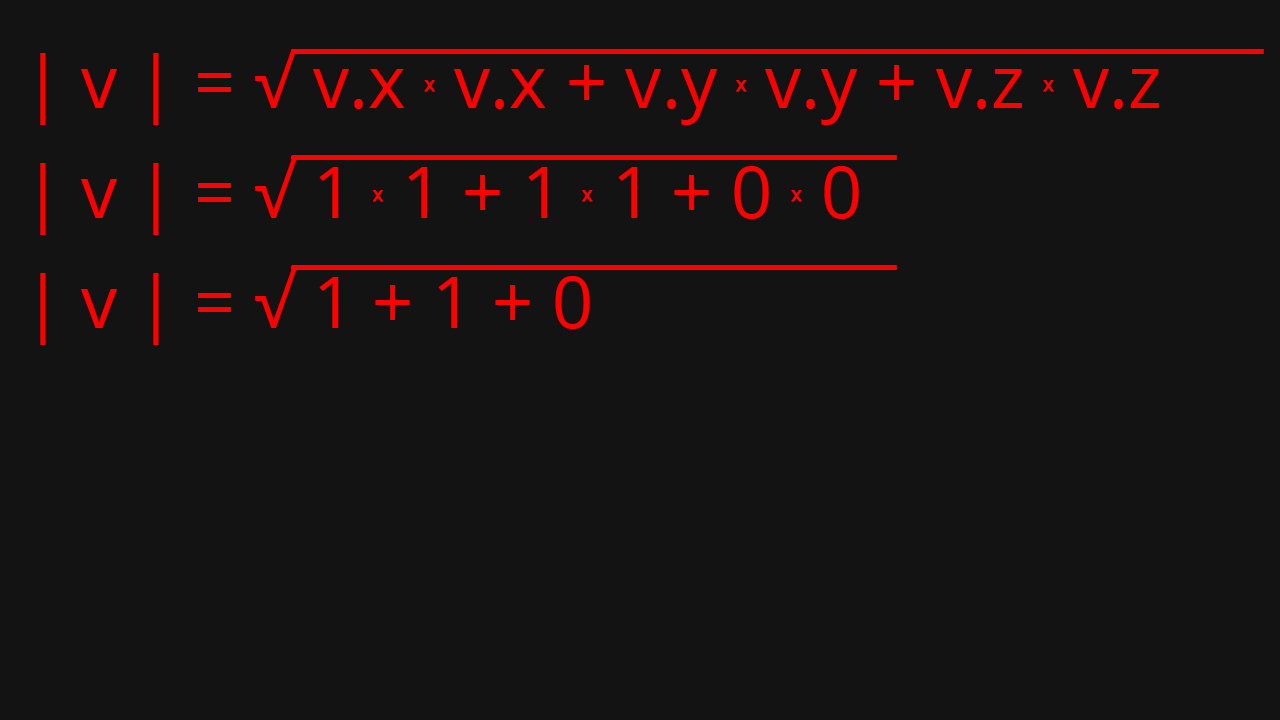
<style>
.page{position:relative;width:1280px;height:720px;background:#131313}
.page>*{position:absolute;margin:0}
.t1{font:72px "OpenSans";color:#ff0000}
.t2{font:20px "OpenSans";color:#ff0000;font-weight:bold}
</style>
<div class="page">
<p class="t1" style="left:40px;top:49px;width:1119px;height:76px">| v | = √ v.x <span class="t2">x</span> v.x + v.y <span class="t2">x</span> v.y + v.z <span class="t2">x</span> v.z</p>
<p class="t1" style="left:40px;top:159px;width:819px;height:76px">| v | = √ 1 <span class="t2">x</span> 1 + 1 <span class="t2">x</span> 1 + 0 <span class="t2">x</span> 0</p>
<p class="t1" style="left:40px;top:269px;width:550px;height:76px">| v | = √ 1 + 1 + 0</p>
</div>
